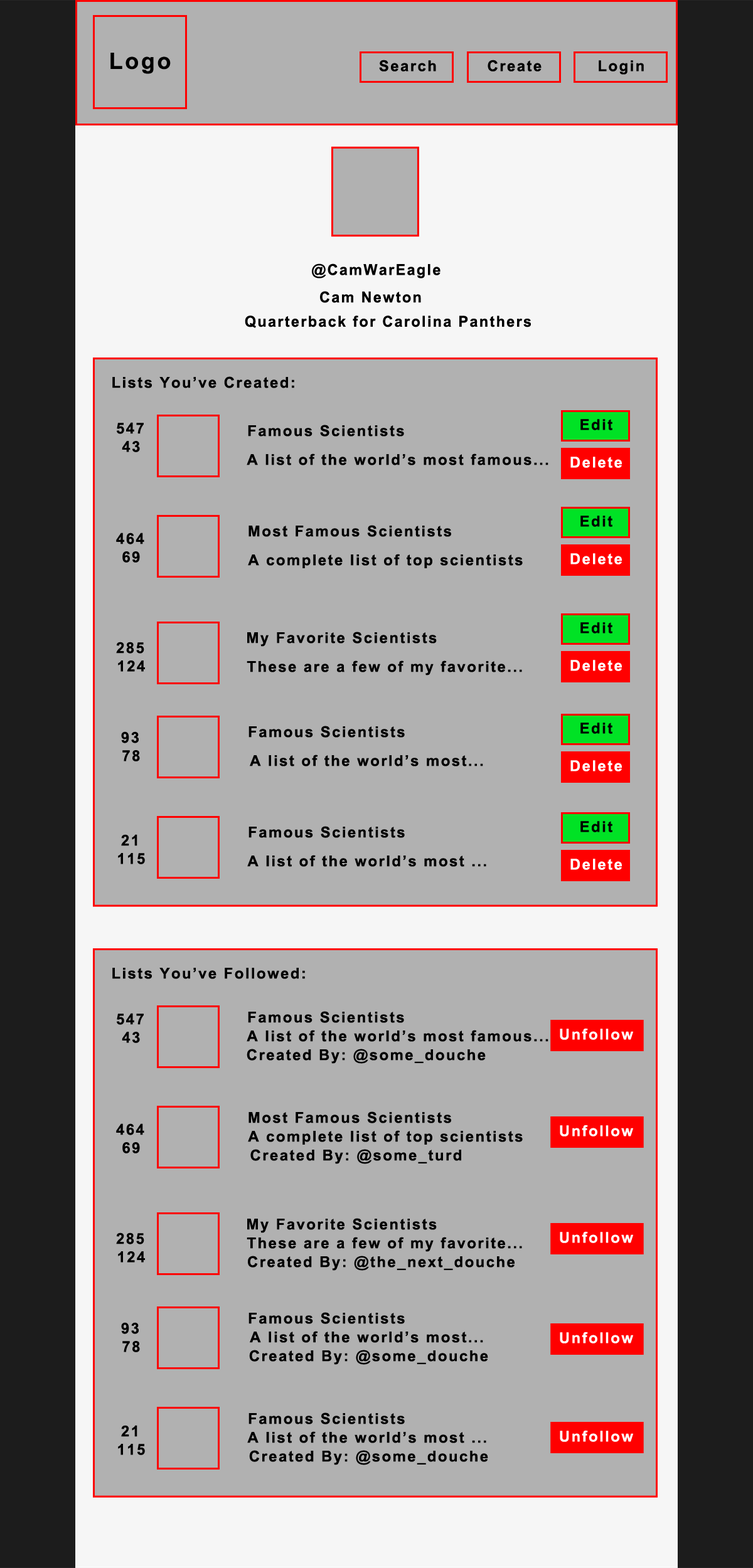
<style>
.page{position:relative;width:753px;height:1568px;background:#b1b1b1}
.page>*{position:absolute;margin:0}
.t1{font:22.6px "Arial-BoldMT";letter-spacing:0.1em;color:#000000}
.t2{font:15.1px "Arial-BoldMT";letter-spacing:0.1em;color:#000000}
.t3{font:15.1px "Arial-BoldMT";letter-spacing:0.1em;color:#ffffff}
</style>
<div class="page">
<p class="t1" style="left:110px;top:53px;width:61px;height:21px">Logo</p>
<p class="t2" style="left:379px;top:60px;width:57px;height:12px">Search</p>
<p class="t2" style="left:487px;top:60px;width:54px;height:12px">Create</p>
<p class="t2" style="left:598px;top:60px;width:46px;height:15px">Login</p>
<p class="t2" style="left:312px;top:263px;width:128px;height:15px">@CamWarEagle</p>
<p class="t2" style="left:320px;top:291px;width:101px;height:12px">Cam Newton</p>
<p class="t2" style="left:245px;top:315px;width:286px;height:13px">Quarterback for Carolina Panthers</p>
<p class="t2" style="left:112px;top:376px;width:182px;height:12px">Lists You’ve Created:</p>
<p class="t2" style="left:117px;top:422px;width:27px;height:12px">547</p>
<p class="t2" style="left:248px;top:425px;width:156px;height:12px">Famous Scientists</p>
<p class="t2" style="left:580px;top:419px;width:32px;height:11px">Edit</p>
<p class="t2" style="left:122px;top:441px;width:18px;height:11px">43</p>
<p class="t2" style="left:246px;top:453px;width:302px;height:12px">A list of the world’s most famous...</p>
<p class="t3" style="left:570px;top:457px;width:52px;height:11px">Delete</p>
<p class="t2" style="left:580px;top:516px;width:32px;height:11px">Edit</p>
<p class="t2" style="left:116px;top:532px;width:28px;height:12px">464</p>
<p class="t2" style="left:248px;top:525px;width:203px;height:12px">Most Famous Scientists</p>
<p class="t2" style="left:122px;top:551px;width:18px;height:12px">69</p>
<p class="t2" style="left:248px;top:554px;width:274px;height:14px">A complete list of top scientists</p>
<p class="t3" style="left:570px;top:553px;width:52px;height:11px">Delete</p>
<p class="t2" style="left:580px;top:622px;width:32px;height:11px">Edit</p>
<p class="t2" style="left:116px;top:642px;width:28px;height:12px">285</p>
<p class="t2" style="left:247px;top:632px;width:190px;height:15px">My Favorite Scientists</p>
<p class="t2" style="left:118px;top:660px;width:27px;height:12px">124</p>
<p class="t2" style="left:246px;top:660px;width:276px;height:15px">These are a few of my favorite...</p>
<p class="t3" style="left:570px;top:660px;width:52px;height:11px">Delete</p>
<p class="t2" style="left:248px;top:726px;width:157px;height:12px">Famous Scientists</p>
<p class="t2" style="left:580px;top:723px;width:32px;height:11px">Edit</p>
<p class="t2" style="left:121px;top:731px;width:18px;height:12px">93</p>
<p class="t2" style="left:122px;top:750px;width:18px;height:11px">78</p>
<p class="t2" style="left:250px;top:755px;width:233px;height:11px">A list of the world’s most...</p>
<p class="t3" style="left:570px;top:760px;width:52px;height:11px">Delete</p>
<p class="t2" style="left:580px;top:821px;width:32px;height:11px">Edit</p>
<p class="t2" style="left:248px;top:826px;width:157px;height:12px">Famous Scientists</p>
<p class="t2" style="left:121px;top:834px;width:16px;height:12px">21</p>
<p class="t2" style="left:118px;top:853px;width:27px;height:11px">115</p>
<p class="t2" style="left:247px;top:855px;width:239px;height:12px">A list of the world’s most ...</p>
<p class="t3" style="left:570px;top:859px;width:52px;height:11px">Delete</p>
<p class="t2" style="left:112px;top:968px;width:193px;height:11px">Lists You’ve Followed:</p>
<p class="t2" style="left:117px;top:1013px;width:27px;height:12px">547</p>
<p class="t2" style="left:248px;top:1011px;width:156px;height:12px">Famous Scientists</p>
<p class="t2" style="left:122px;top:1032px;width:18px;height:11px">43</p>
<p class="t2" style="left:246px;top:1030px;width:302px;height:12px">A list of the world’s most famous...</p>
<p class="t3" style="left:559px;top:1028px;width:74px;height:12px">Unfollow</p>
<p class="t2" style="left:246px;top:1049px;width:239px;height:15px">Created By: @some_douche</p>
<p class="t2" style="left:248px;top:1111px;width:203px;height:12px">Most Famous Scientists</p>
<p class="t2" style="left:116px;top:1123px;width:28px;height:12px">464</p>
<p class="t2" style="left:248px;top:1130px;width:274px;height:15px">A complete list of top scientists</p>
<p class="t3" style="left:559px;top:1125px;width:74px;height:11px">Unfollow</p>
<p class="t2" style="left:122px;top:1142px;width:18px;height:11px">69</p>
<p class="t2" style="left:250px;top:1149px;width:211px;height:15px">Created By: @some_turd</p>
<p class="t2" style="left:247px;top:1218px;width:190px;height:15px">My Favorite Scientists</p>
<p class="t2" style="left:116px;top:1232px;width:28px;height:12px">285</p>
<p class="t2" style="left:246px;top:1237px;width:276px;height:15px">These are a few of my favorite...</p>
<p class="t3" style="left:559px;top:1231px;width:74px;height:12px">Unfollow</p>
<p class="t2" style="left:118px;top:1251px;width:27px;height:12px">124</p>
<p class="t2" style="left:248px;top:1256px;width:266px;height:15px">Created By: @the_next_douche</p>
<p class="t2" style="left:248px;top:1312px;width:157px;height:12px">Famous Scientists</p>
<p class="t2" style="left:121px;top:1322px;width:18px;height:12px">93</p>
<p class="t2" style="left:250px;top:1331px;width:233px;height:12px">A list of the world’s most...</p>
<p class="t3" style="left:559px;top:1332px;width:74px;height:11px">Unfollow</p>
<p class="t2" style="left:122px;top:1341px;width:18px;height:11px">78</p>
<p class="t2" style="left:249px;top:1350px;width:239px;height:15px">Created By: @some_douche</p>
<p class="t2" style="left:248px;top:1412px;width:157px;height:12px">Famous Scientists</p>
<p class="t2" style="left:121px;top:1425px;width:16px;height:12px">21</p>
<p class="t2" style="left:247px;top:1431px;width:239px;height:12px">A list of the world’s most ...</p>
<p class="t3" style="left:559px;top:1430px;width:74px;height:12px">Unfollow</p>
<p class="t2" style="left:118px;top:1444px;width:27px;height:11px">115</p>
<p class="t2" style="left:249px;top:1450px;width:239px;height:15px">Created By: @some_douche</p>
</div>
